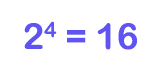
<style>
.page{position:relative;width:160px;height:75px;background:#ffffff}
.page>*{position:absolute;margin:0}
.t1{font:36px "ArialRoundedMTBold";color:#5f54f1}
</style>
<div class="page">
<p class="t1" style="left:24px;top:21px;width:113px;height:29px">24 = 16</p>
</div>
